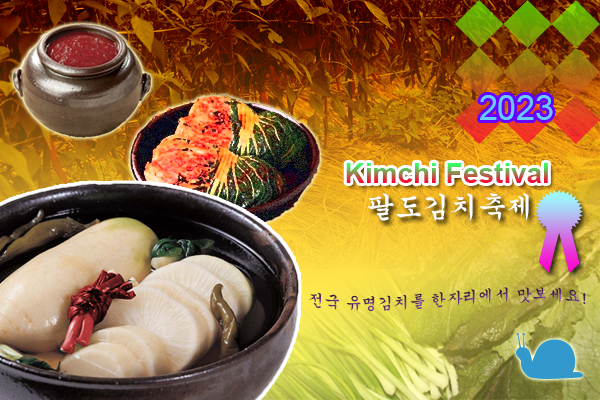
<style>
.page{position:relative;width:600px;height:400px}
.page>*{position:absolute;margin:0}
.t1{font:34px "ArialMT";color:#66ccff}
.t2{font:28px "Arial-BoldMT"}
.t3{font:28px "Gungsuh";color:#ffffff}
.t4{font:16px "Gungsuh"}
</style>
<div class="page">
<p class="t1" style="left:480px;top:95px;width:73px;height:25px">2023</p>
<p class="t2" style="left:346px;top:163px;width:202px;height:20px">Kimchi Festival</p>
<p class="t3" style="left:368px;top:193px;width:161px;height:28px">팔도김치축제</p>
<p class="t4" style="left:309px;top:287px;width:277px;height:25px">전국 유명김치를 한자리에서 맛보세요!</p>
</div>
